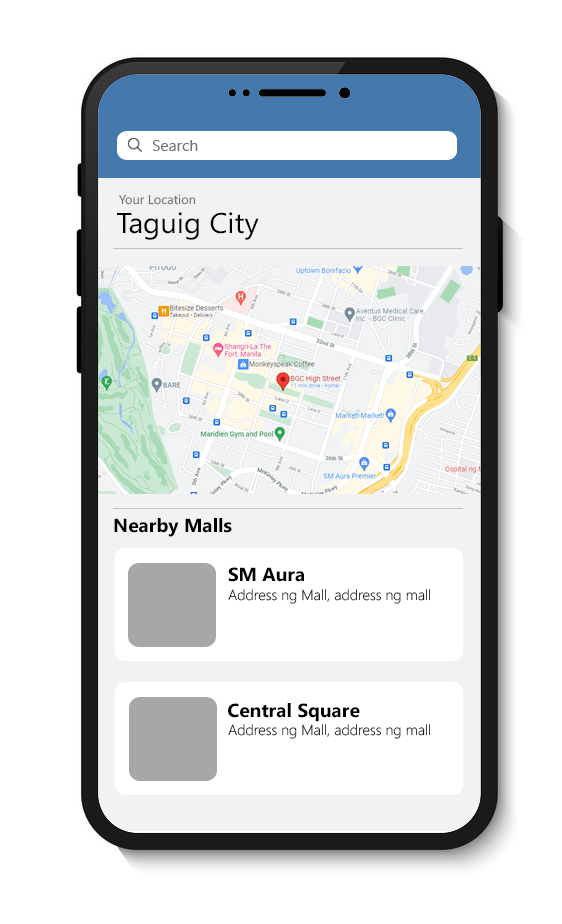
<style>
.page{position:relative;width:562px;height:924px;background:#ffffff}
.page>*{position:absolute;margin:0}
.t1{font:15.1px "SegoeUI";color:#757575;scale:1.04 1}
.t2{font:12.7px "SegoeUI";color:#757575}
.t3{font:28.5px "SegoeUI";color:#000000}
.t4{font:18.7px "SegoeUI-Bold";color:#000000}
.t5{font:14.4px "SegoeUI-Light";color:#000000}
</style>
<div class="page">
<p class="t1" style="left:152px;top:140px;width:46px;height:11px">Search</p>
<p class="t2" style="left:119px;top:194px;width:77px;height:11px">Your Location</p>
<p class="t3" style="left:117px;top:212px;width:142px;height:28px">Taguig City</p>
<p class="t4" style="left:114px;top:518px;width:118px;height:19px">Nearby Malls</p>
<p class="t4" style="left:228px;top:567px;width:76px;height:15px">SM Aura</p>
<p class="t5" style="left:228px;top:589px;width:202px;height:15px">Address ng Mall, address ng mall</p>
<p class="t4" style="left:228px;top:703px;width:132px;height:19px">Central Square</p>
<p class="t5" style="left:228px;top:724px;width:202px;height:15px">Address ng Mall, address ng mall</p>
</div>
